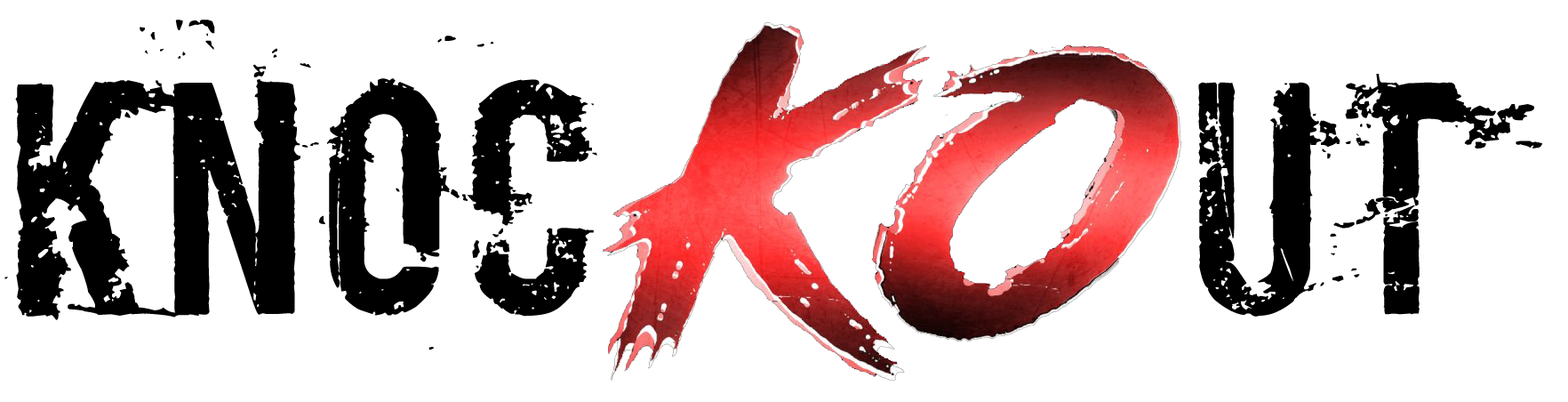
<style>
.page{position:relative;width:1568px;height:402px;background:#ffffff}
.page>*{position:absolute;margin:0}
.t1{font:277.8px "Boycott";color:#000000}
</style>
<div class="page">
<p class="t1" style="left:4px;top:20px;width:593px;height:330px">KNOC</p>
<p class="t1" style="left:1198px;top:74px;width:344px;height:242px">UT</p>
</div>
